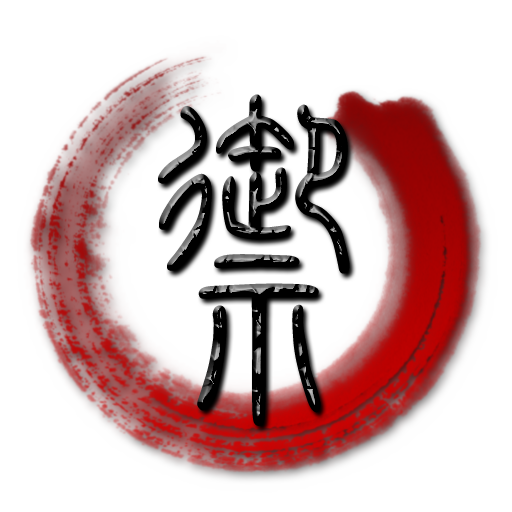
<style>
.page{position:relative;width:512px;height:512px;background:#ffffff}
.page>*{position:absolute;margin:0}
.t1{font:350px "FZuanSu";color:#000000}
</style>
<div class="page">
<p class="t1" style="left:158px;top:94px;width:192px;height:332px">御</p>
</div>
